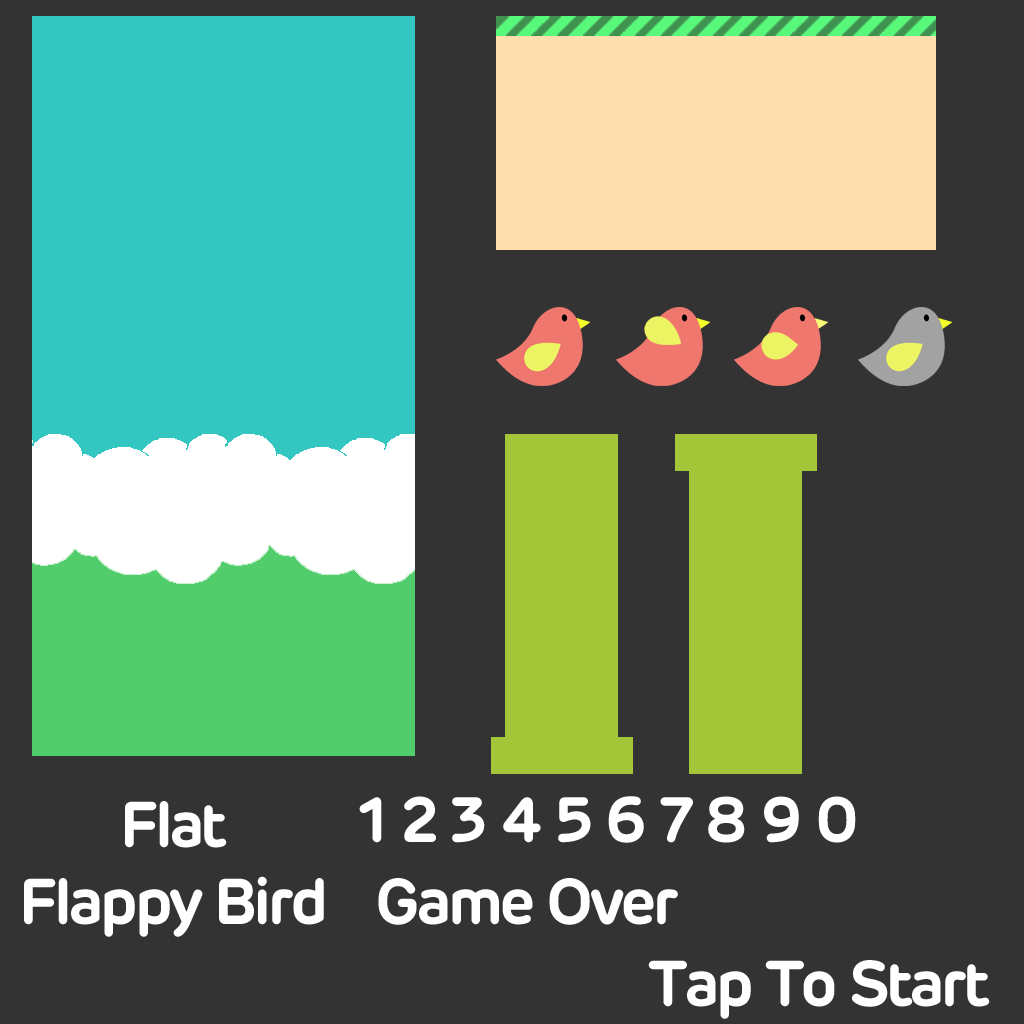
<style>
.page{position:relative;width:1024px;height:1024px;background:#333333}
.page>*{position:absolute;margin:0}
.t1{font:64px "Rubrik-SemiBold";letter-spacing:-0.06em;color:#ffffff}
</style>
<div class="page">
<p class="t1" style="left:359px;top:796px;width:497px;height:47px">1 2 3 4 5 6 7 8 9 0</p>
<p class="t1" style="left:24px;top:801px;width:300px;height:136px;text-align:center">Flat<br>Flappy Bird</p>
<p class="t1" style="left:378px;top:878px;width:300px;height:47px">Game Over</p>
<p class="t1" style="left:648px;top:960px;width:342px;height:59px">Tap To Start</p>
</div>
